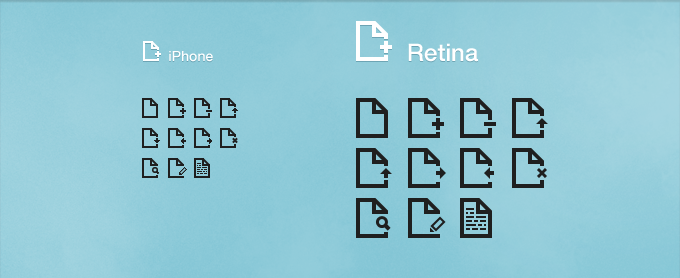
<style>
.page{position:relative;width:680px;height:278px}
.page>*{position:absolute;margin:0}
.t1{font:14px "HelveticaNeue-Medium";color:#ffffff}
.t2{font:24px "HelveticaNeue-Medium";color:#ffffff}
</style>
<div class="page">
<p class="t1" style="left:169px;top:51px;width:44px;height:11px">iPhone</p>
<p class="t2" style="left:408px;top:43px;width:70px;height:19px">Retina</p>
</div>
